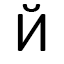
<style>
.page{position:relative;width:64px;height:64px;background:#ffffff}
.page>*{position:absolute;margin:0}
.t1{font:58.3px "Calibri";color:#000000}
</style>
<div class="page">
<p class="t1" style="left:17px;top:4px;width:29px;height:47px">Й</p>
</div>
